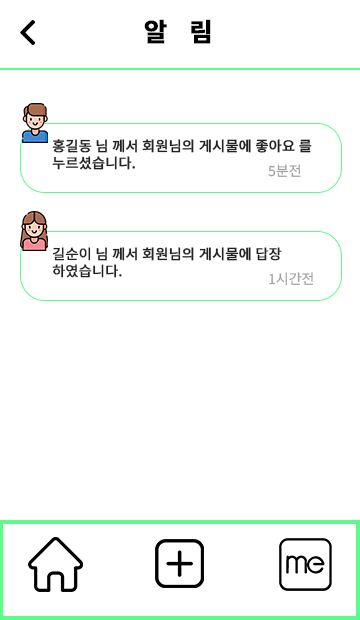
<style>
.page{position:relative;width:360px;height:620px;background:#ffffff}
.page>*{position:absolute;margin:0}
.t1{font:25.2px "NotoSansKR-Bold";letter-spacing:0.3em;color:#000000;font-weight:bold}
.t2{font:14px "NotoSansKR-Regular";color:#222222;font-weight:bold}
.t3{font:14px "NotoSansKR-Regular";color:#a1a1a1}
</style>
<div class="page">
<p class="t1" style="left:144px;top:19px;width:67px;height:25px">알 림</p>
<p class="t2" style="left:52px;top:139px;width:260px;height:31px">홍길동 님 께서 회원님의 게시물에 좋아요 를<br>누르셨습니다.</p>
<p class="t3" style="left:268px;top:164px;width:33px;height:13px">5분전</p>
<p class="t2" style="left:52px;top:247px;width:230px;height:31px">길순이 님 께서 회원님의 게시물에 답장 <br>하였습니다.</p>
<p class="t3" style="left:269px;top:272px;width:45px;height:14px">1시간전</p>
</div>
